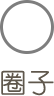
<style>
.page{position:relative;width:54px;height:96px;background:#ffffff}
.page>*{position:absolute;margin:0}
.t1{font:27px "YouYuan";color:#5f574c;text-transform:uppercase;font-weight:bold}
</style>
<div class="page">
<p class="t1" style="left:1px;top:70px;width:53px;height:26px">圈子</p>
</div>
